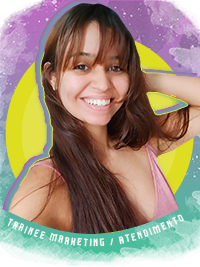
<style>
.page{position:relative;width:200px;height:267px}
.page>*{position:absolute;margin:0}
.t1{font:9.5px "BOSTONCAPS";letter-spacing:0.2em;color:#fbf9f9;scale:1.04 1}
</style>
<div class="page">
<p class="t1" style="left:7px;top:214px;width:178px;height:33px;rotate:-1deg">TRAINEE MARKETING / ATENDIMENTO</p>
</div>
